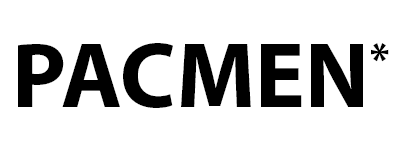
<style>
.page{position:relative;width:400px;height:148px;background:#ffffff}
.page>*{position:absolute;margin:0}
.t1{font:93.8px "MyriadPro-Bold";color:#000000}
.t2{font:46px "MyriadPro-Bold";color:#000000;scale:0.96 1}
</style>
<div class="page">
<p class="t1" style="left:18px;top:43px;width:345px;height:65px">PACMEN</p>
<p class="t2" style="left:371px;top:43px;width:18px;height:19px">*</p>
</div>
